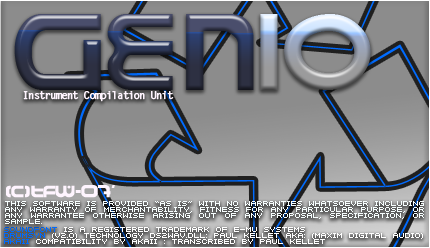
<style>
.page{position:relative;width:430px;height:248px}
.page>*{position:absolute;margin:0}
.t1{font:11px "LetterGothicStd-Bold";letter-spacing:-0.12em;color:#fff5ff;font-weight:bold}
.t2{font:16px "AmalgamR";color:#fff5ff;font-weight:bold}
.t3{font:8px/6px "SFIntermosaicB";color:#f8ffff;text-transform:uppercase}
.t4{font:8px/6px "SFIntermosaicB";color:#ffffff}
.t5{font:8px/6px "SFIntermosaicB";color:#006bff}
</style>
<div class="page">
<p class="t1" style="left:23px;top:91px;width:151px;height:11px">Instrument Compilation Unit</p>
<p class="t2" style="left:6px;top:185px;width:109px;height:13px">(c)tfw-07'</p>
<p class="t3" style="left:5px;top:201px;width:419px;height:23px;text-align:justify">This software IS PROVIDED “AS IS” WITH NO WARRANTIES WHATSOEVER INCLUDING ANY WARRANTY OF MERCHANTABILITY, FITNESS FOR ANY PARTICULAR PURPOSE, OR ANY WARRANTEE OTHERWISE ARISING OUT OF ANY PROPOSAL, SPECIFICATION, OR SAMPLE.</p>
<p class="t4" style="left:4px;top:227px;width:419px;height:17px"><span class="t5">soundfont </span>is a registered trademark of e-mu systems<br><span class="t5">DrumSyn</span> (v2.0) technology ds2wav.dll: Paul Kellet aka: (maxim digital audio)<br><span class="t5">AKAII </span>compatibility by AKAII : transcribed by Paul Kellet</p>
</div>
